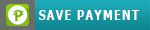
<style>
.page{position:relative;width:150px;height:30px}
.page>*{position:absolute;margin:0}
.t1{font:14.1px "Tahoma-Bold";letter-spacing:0.1em;color:#ffffff;scale:0.8 1}
</style>
<div class="page">
<p class="t1" style="left:39px;top:10px;width:100px;height:10px">SAVE PAYMENT</p>
</div>
